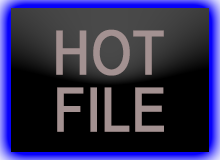
<style>
.page{position:relative;width:220px;height:160px;background:#000000}
.page>*{position:absolute;margin:0}
.t1{font:60.8px "ArialMT";color:#a49191;font-weight:bold;scale:0.84 1}
</style>
<div class="page">
<p class="t1" style="left:56px;top:29px;width:108px;height:47px">HOT</p>
<p class="t1" style="left:57px;top:87px;width:107px;height:45px">FILE</p>
</div>
